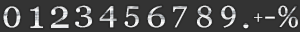
<style>
.page{position:relative;width:300px;height:32px;background:#333333}
.page>*{position:absolute;margin:0}
.t1{font:38px "Vani";color:#eaeaea;scale:0.85 1}
.t2{font:39.1px "Vani"}
.t3{font:39.9px "Vani";color:#ffffff;scale:0.95 1}
.t4{font:30px "Vani";color:#ececed;scale:1.2 1}
.t5{font:30px "Vani";scale:1.1 1}
.t6{font:30px "Vani"}
.t7{font:30px "Vani";scale:1.2 1}
.t8{font:30px "Vani";scale:0.91 1}
.t9{font:16px "Vani";color:#ffffff}
.t10{font:20.3px "Vani";color:#ffffff;scale:1.58 1}
.t11{font:35.9px "Vani";color:#ffffff}
</style>
<div class="page">
<p class="t1" style="left:3px;top:6px;width:18px;height:22px">0</p>
<p class="t2" style="left:30px;top:6px;width:13px;height:22px">1</p>
<p class="t3" style="left:51px;top:6px;width:18px;height:22px">2</p>
<p class="t4" style="left:75px;top:5px;width:17px;height:23px">3</p>
<p class="t5" style="left:99px;top:6px;width:18px;height:22px">4</p>
<p class="t6" style="left:124px;top:6px;width:15px;height:22px">5</p>
<p class="t7" style="left:147px;top:5px;width:18px;height:23px">6</p>
<p class="t6" style="left:173px;top:6px;width:14px;height:22px">7</p>
<p class="t6" style="left:197px;top:5px;width:15px;height:23px">8</p>
<p class="t6" style="left:221px;top:5px;width:15px;height:23px">9</p>
<p class="t8" style="left:278px;top:5px;width:20px;height:23px">%</p>
<p class="t9" style="left:254px;top:13px;width:9px;height:9px">+</p>
<p class="t10" style="left:265px;top:16px;width:10px;height:3px">-</p>
<p class="t11" style="left:243px;top:23px;width:6px;height:6px">.</p>
</div>
